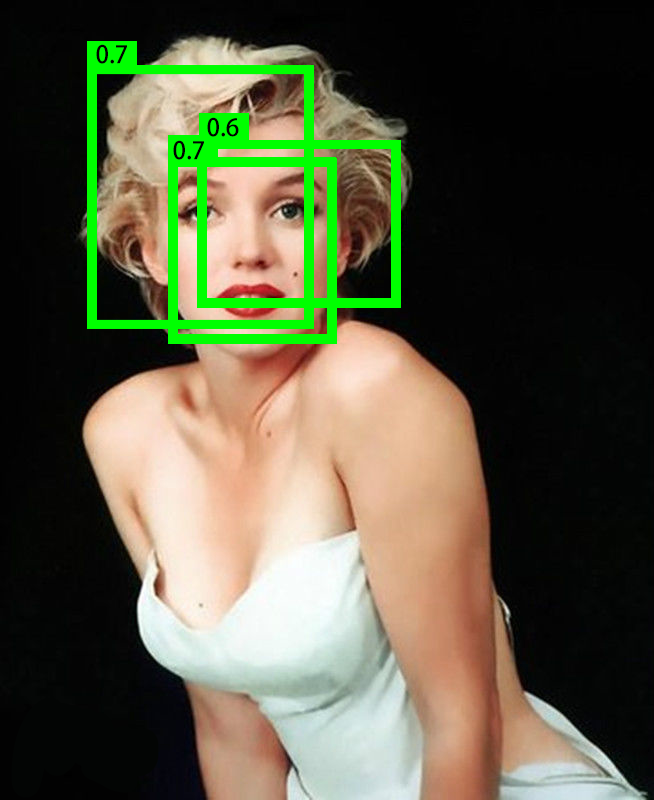
<style>
.page{position:relative;width:654px;height:800px}
.page>*{position:absolute;margin:0}
.t1{font:24px "AdobeHeitiStd-Regular";color:#000000}
</style>
<div class="page">
<p class="t1" style="left:96px;top:44px;width:31px;height:20px">0.7</p>
<p class="t1" style="left:207px;top:117px;width:32px;height:20px">0.6</p>
<p class="t1" style="left:173px;top:140px;width:31px;height:20px">0.7</p>
</div>
